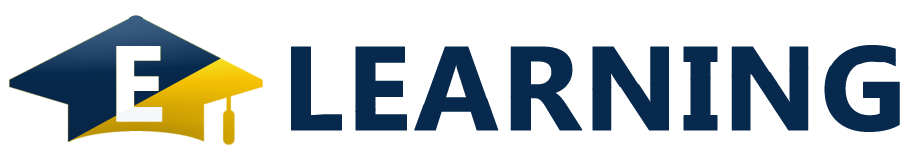
<style>
.page{position:relative;width:909px;height:155px;background:#ffffff}
.page>*{position:absolute;margin:0}
.t1{font:120px "KhmerUI-Bold";color:#07294d;text-transform:uppercase;font-weight:bold}
</style>
<div class="page">
<p class="t1" style="left:291px;top:45px;width:609px;height:88px">Learning</p>
<p class="t1" style="left:291px;top:44px;width:609px;height:88px">Learning</p>
</div>
